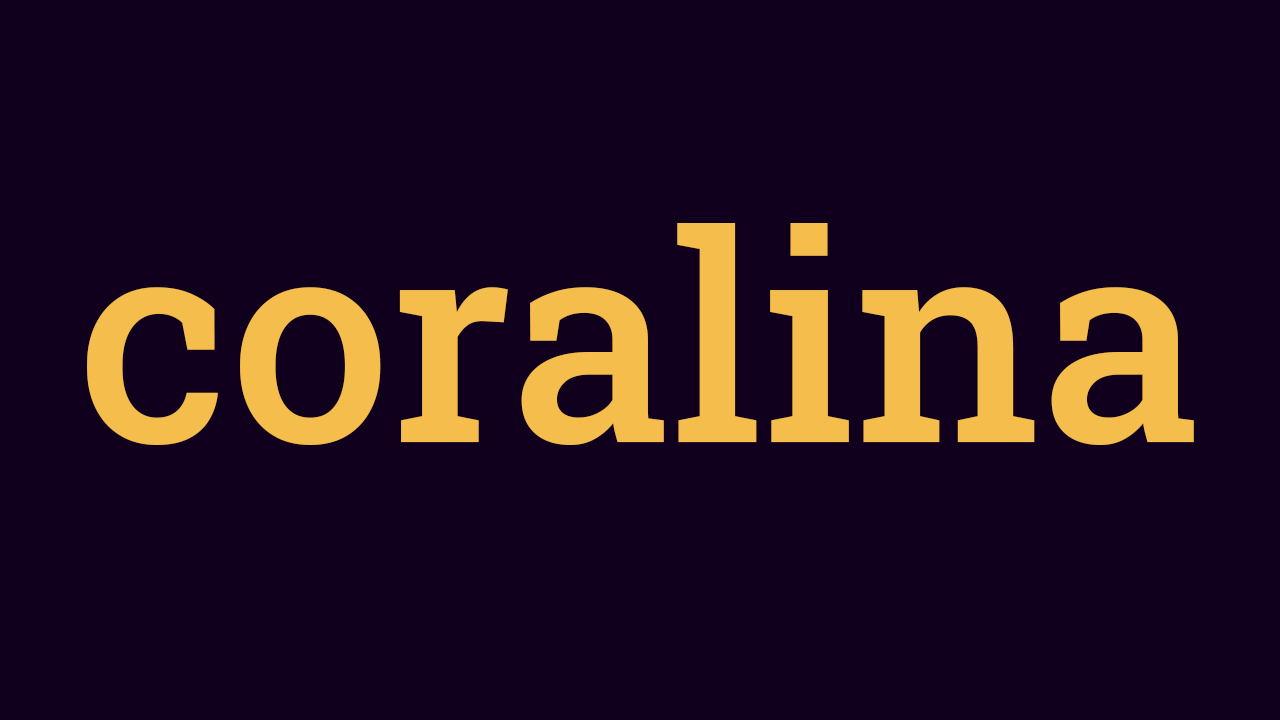
<style>
.page{position:relative;width:1280px;height:720px;background:#10001e}
.page>*{position:absolute;margin:0}
.t1{font:287.5px "RobotoSlab-Medium";color:#f5bd4b}
</style>
<div class="page">
<p class="t1" style="left:87px;top:223px;width:1107px;height:222px">coralina</p>
</div>
